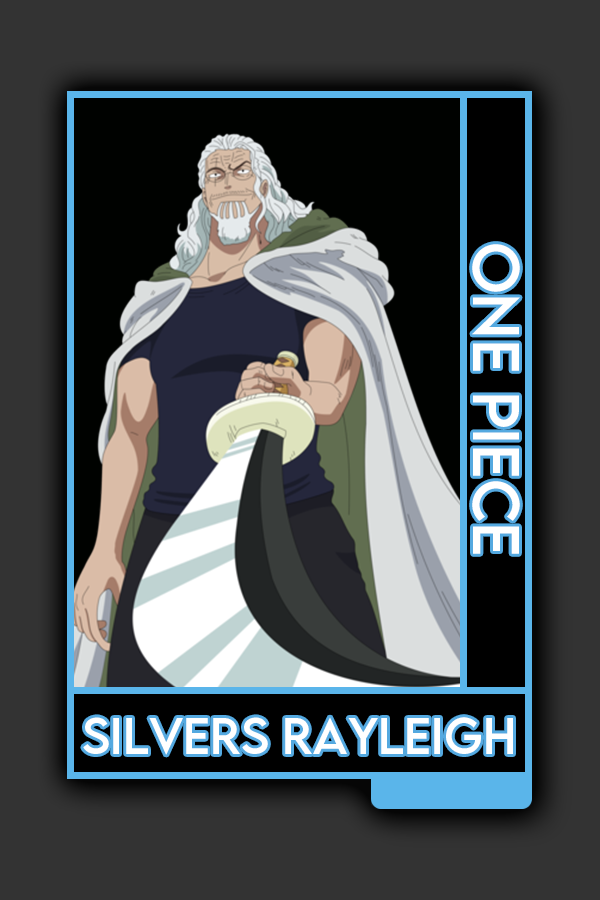
<style>
.page{position:relative;width:600px;height:900px;background:#333333}
.page>*{position:absolute;margin:0}
.t1{font:58.4px "LEMONMILK-Regular";color:#ffffff}
.t2{font:45.6px "LEMONMILK-Regular";color:#ffffff}
</style>
<div class="page">
<p class="t1" style="left:472px;top:244px;width:48px;height:310px;rotate:90deg">One Piece</p>
<p class="t2" style="left:83px;top:717px;width:430px;height:38px">Silvers Rayleigh</p>
</div>
